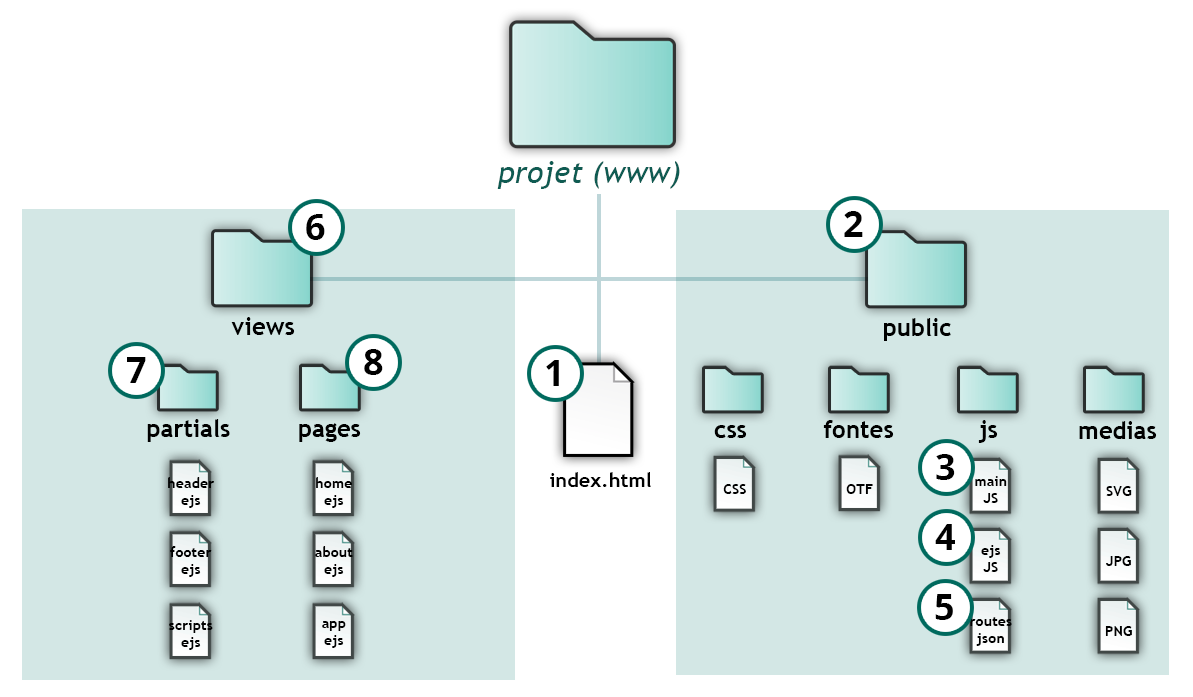
<style>
.page{position:relative;width:1193px;height:697px;background:#ffffff}
.page>*{position:absolute;margin:0}
.t1{font:30px "TrebuchetMS-Italic";color:#0f5b52}
.t2{font:36px "OpenSans-Bold";color:#000000}
.t3{font:24px "TrebuchetMS-Bold";color:#000000}
.t4{font:20px "TrebuchetMS-Bold";color:#000000}
.t5{font:14.4px "TrebuchetMS-Bold";color:#000000}
</style>
<div class="page">
<p class="t1" style="left:497px;top:161px;width:183px;height:28px">projet (www)</p>
<p class="t2" style="left:306px;top:214px;width:19px;height:26px">6</p>
<p class="t2" style="left:844px;top:211px;width:19px;height:26px">2</p>
<p class="t3" style="left:231px;top:317px;width:64px;height:18px">views</p>
<p class="t3" style="left:884px;top:318px;width:67px;height:23px">public</p>
<p class="t2" style="left:364px;top:349px;width:19px;height:26px">8</p>
<p class="t2" style="left:127px;top:357px;width:19px;height:26px">7</p>
<p class="t2" style="left:546px;top:360px;width:13px;height:26px">1</p>
<p class="t3" style="left:147px;top:419px;width:83px;height:23px">partials</p>
<p class="t3" style="left:299px;top:423px;width:62px;height:19px">pages</p>
<p class="t3" style="left:714px;top:425px;width:33px;height:13px">css</p>
<p class="t3" style="left:823px;top:420px;width:71px;height:18px">fontes</p>
<p class="t3" style="left:978px;top:420px;width:20px;height:23px">js</p>
<p class="t3" style="left:1079px;top:421px;width:78px;height:18px">medias</p>
<p class="t2" style="left:936px;top:454px;width:19px;height:26px">3</p>
<p class="t4" style="left:550px;top:472px;width:101px;height:15px">index.html</p>
<p class="t5" style="left:168px;top:477px;width:46px;height:31px;text-align:center">header<br>ejs</p>
<p class="t5" style="left:316px;top:477px;width:36px;height:31px;text-align:center">home<br>ejs</p>
<p class="t5" style="left:723px;top:484px;width:23px;height:10px">CSS</p>
<p class="t5" style="left:846px;top:484px;width:27px;height:10px">OTF</p>
<p class="t5" style="left:975px;top:476px;width:32px;height:27px;text-align:center">main<br>JS</p>
<p class="t5" style="left:1106px;top:486px;width:26px;height:10px">SVG</p>
<p class="t2" style="left:935px;top:524px;width:20px;height:26px">4</p>
<p class="t5" style="left:981px;top:545px;width:20px;height:27px;text-align:center">ejs<br>JS</p>
<p class="t5" style="left:170px;top:546px;width:42px;height:31px;text-align:center">footer<br>ejs</p>
<p class="t5" style="left:315px;top:546px;width:38px;height:31px;text-align:center">about<br>ejs</p>
<p class="t5" style="left:1106px;top:556px;width:25px;height:10px">JPG</p>
<p class="t2" style="left:935px;top:594px;width:18px;height:26px">5</p>
<p class="t5" style="left:970px;top:617px;width:42px;height:29px;text-align:center">routes<br>json</p>
<p class="t5" style="left:169px;top:620px;width:44px;height:30px;text-align:center">scripts<br>ejs</p>
<p class="t5" style="left:322px;top:621px;width:24px;height:27px;text-align:center">app<br>ejs</p>
<p class="t5" style="left:1105px;top:626px;width:27px;height:10px">PNG</p>
</div>
